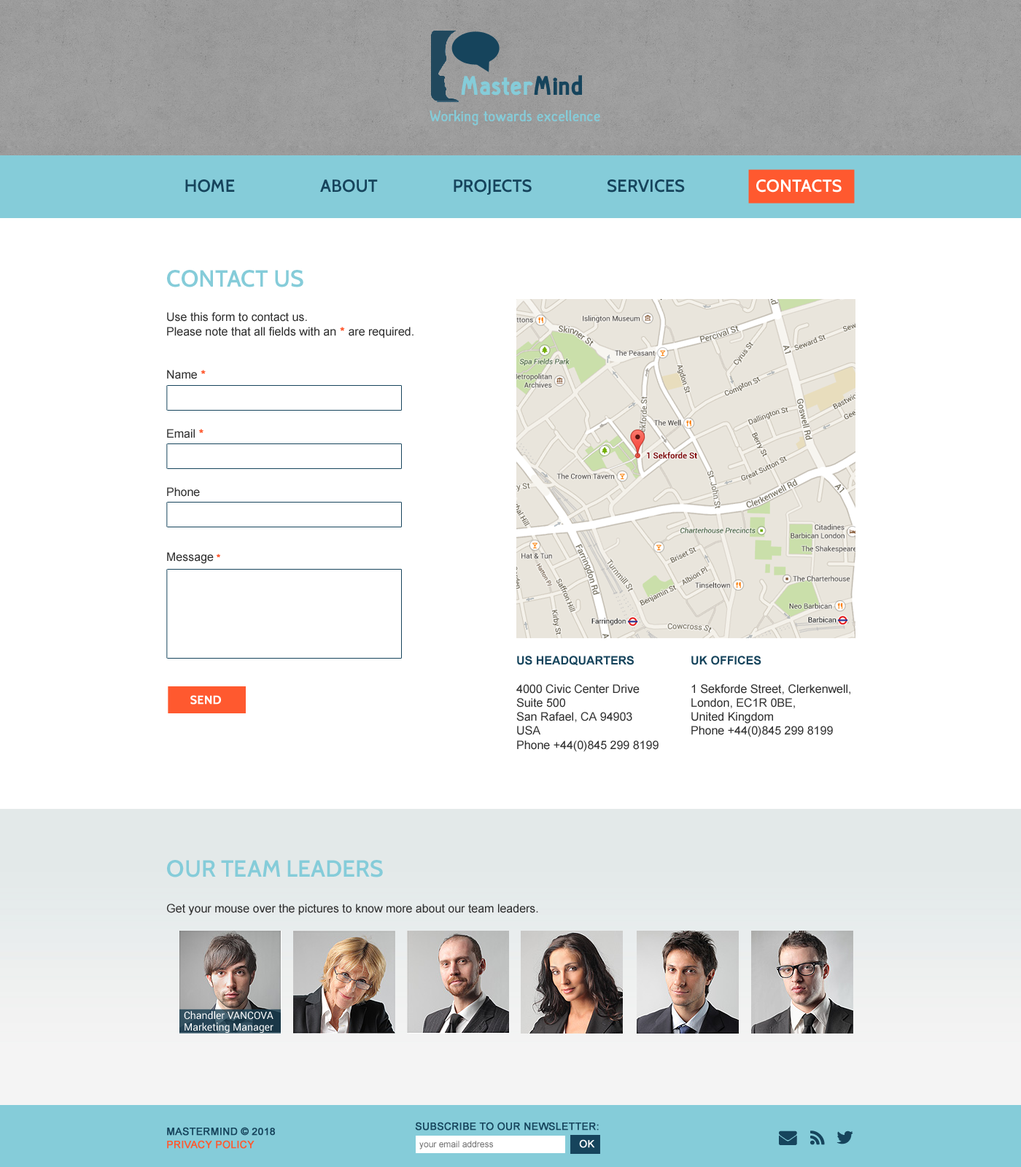
<style>
.page{position:relative;width:1021px;height:1167px;background:#ffffff}
.page>*{position:absolute;margin:0}
.t1{font:17.5px "Cabin-SemiBold";color:#16445c}
.t2{font:17.5px "Cabin-SemiBold";color:#ffffff}
.t3{font:23.3px "Cabin-SemiBold";color:#85ccd9;text-transform:uppercase}
.t4{font:11.7px "ArialMT";color:#303030}
.t5{font:11.7px "ArialMT";color:#ff592f;font-weight:bold}
.t6{font:9.5px "ArialMT";color:#ff592f;font-weight:bold}
.t7{font:11.7px "Arial-BoldMT";color:#16445c}
.t8{font:11.7px "Cabin-SemiBold";color:#ffffff;font-weight:bold}
.t9{font:10.2px "Roboto-Regular";color:#ffffff}
.t10{font:10.2px/13.1px "ArialMT";color:#16445c;font-weight:bold}
.t11{font:10.2px/13.1px "ArialMT";color:#ff592f;font-weight:bold}
.t12{font:10.2px "ArialMT";color:#16445c;font-weight:bold}
.t13{font:8.8px "ArialMT";color:#6f6f6f}
.t14{font:10.2px "ArialMT";color:#ffffff;font-weight:bold}
</style>
<div class="page">
<p class="t1" style="left:185px;top:179px;width:50px;height:14px">HOME</p>
<p class="t1" style="left:320px;top:179px;width:522px;height:16px">ABOUT                   PROJECTS                   SERVICES                  <span class="t2">CONTACTS</span></p>
<p class="t3" style="left:167px;top:270px;width:137px;height:17px">contact us</p>
<p class="t4" style="left:167px;top:312px;width:247px;height:27px">Use this form to contact us. <br>Please note that all fields with an <span class="t5">* </span>are required.</p>
<p class="t4" style="left:167px;top:370px;width:39px;height:9px">Name <span class="t5">*</span></p>
<p class="t4" style="left:167px;top:429px;width:37px;height:9px">Email <span class="t5">*</span></p>
<p class="t4" style="left:167px;top:487px;width:33px;height:10px">Phone</p>
<p class="t4" style="left:167px;top:552px;width:53px;height:12px">Message <span class="t6">*</span></p>
<p class="t4" style="left:517px;top:656px;width:142px;height:96px"><span class="t7">US HEADQUARTERS<br><br></span>4000 Civic Center Drive<br>Suite 500<br>San Rafael, CA 94903<br>USA<br>Phone +44(0)845 299 8199</p>
<p class="t4" style="left:692px;top:656px;width:159px;height:82px"><span class="t7">UK OFFICES<br></span><br>1 Sekforde Street, Clerkenwell, London, EC1R 0BE, <br>United Kingdom<br>Phone +44(0)845 299 8199</p>
<p class="t8" style="left:190px;top:695px;width:31px;height:10px">SEND</p>
<p class="t3" style="left:167px;top:860px;width:216px;height:18px">our team leaders</p>
<p class="t4" style="left:167px;top:904px;width:371px;height:12px">Get your mouse over the pictures to know more about our team leaders.</p>
<p class="t9" style="left:184px;top:1011px;width:90px;height:22px">Chandler VANCOVA<br>Marketing Manager</p>
<p class="t10" style="left:167px;top:1127px;width:108px;height:22px">MASTERMIND © 2018<br><span class="t11">PRIVACY POLICY</span></p>
<p class="t12" style="left:415px;top:1122px;width:184px;height:9px">SUBSCRIBE TO OUR NEWSLETTER:</p>
<p class="t13" style="left:420px;top:1141px;width:73px;height:9px">your email address</p>
<p class="t14" style="left:579px;top:1140px;width:16px;height:8px">OK</p>
</div>
